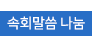
<style>
.page{position:relative;width:92px;height:36px;background:#286ec6}
.page>*{position:absolute;margin:0}
.t1{font:14px "NanumSquareOTFB";letter-spacing:-0.02em;color:#ffffff}
</style>
<div class="page">
<p class="t1" style="left:7px;top:16px;width:78px;height:14px">속회말씀 나눔</p>
</div>
